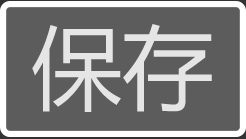
<style>
.page{position:relative;width:246px;height:139px;background:#5c5c5c}
.page>*{position:absolute;margin:0}
.t1{font:90.6px "MicrosoftYaHei";color:#e5e5e5}
</style>
<div class="page">
<p class="t1" style="left:32px;top:24px;width:180px;height:88px">保存</p>
</div>
